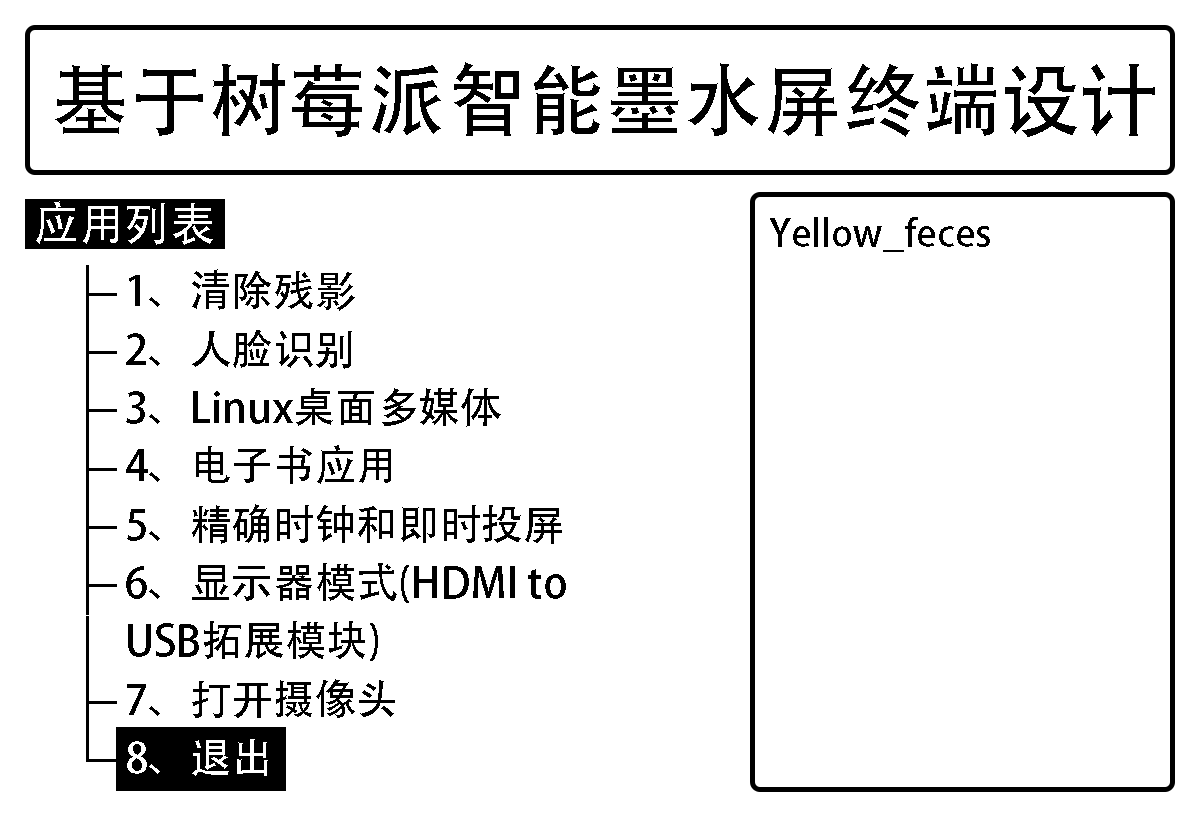
<style>
.page{position:relative;width:1200px;height:825px;background:#ffffff}
.page>*{position:absolute;margin:0}
.t1{font:79.2px "AdobeHeitiStd-Regular";color:#000000}
.t2{font:45.8px "AdobeHeitiStd-Regular";color:#ffffff}
.t3{font:37.5px "AdobeHeitiStd-Regular";color:#000000}
.t4{font:58.3px/58.3px "AdobeHeitiStd-Regular";color:#000000}
.t5{font:41.7px/58.3px "AdobeHeitiStd-Regular";color:#000000}
.t6{font:41.7px/58.3px "AdobeHeitiStd-Regular";color:#ffffff}
</style>
<div class="page">
<p class="t1" style="left:55px;top:62px;width:1100px;height:75px">基于树莓派智能墨水屏终端设计</p>
<p class="t2" style="left:36px;top:201px;width:177px;height:44px">应用列表</p>
<p class="t3" style="left:770px;top:217px;width:220px;height:35px">Yellow_feces</p>
<p class="t4" style="left:86px;top:265px;width:31px;height:497px">├<br>├<br>├<br>├<br>├<br>├<br>│<br>├<br>└</p>
<p class="t5" style="left:126px;top:269px;width:440px;height:507px">1、清除残影<br>2、人脸识别<br>3、Linux桌面多媒体<br>4、电子书应用<br>5、精确时钟和即时投屏<br>6、显示器模式(HDMI to USB拓展模块)<br>7、打开摄像头<br><span class="t6">8、退出</span></p>
</div>
